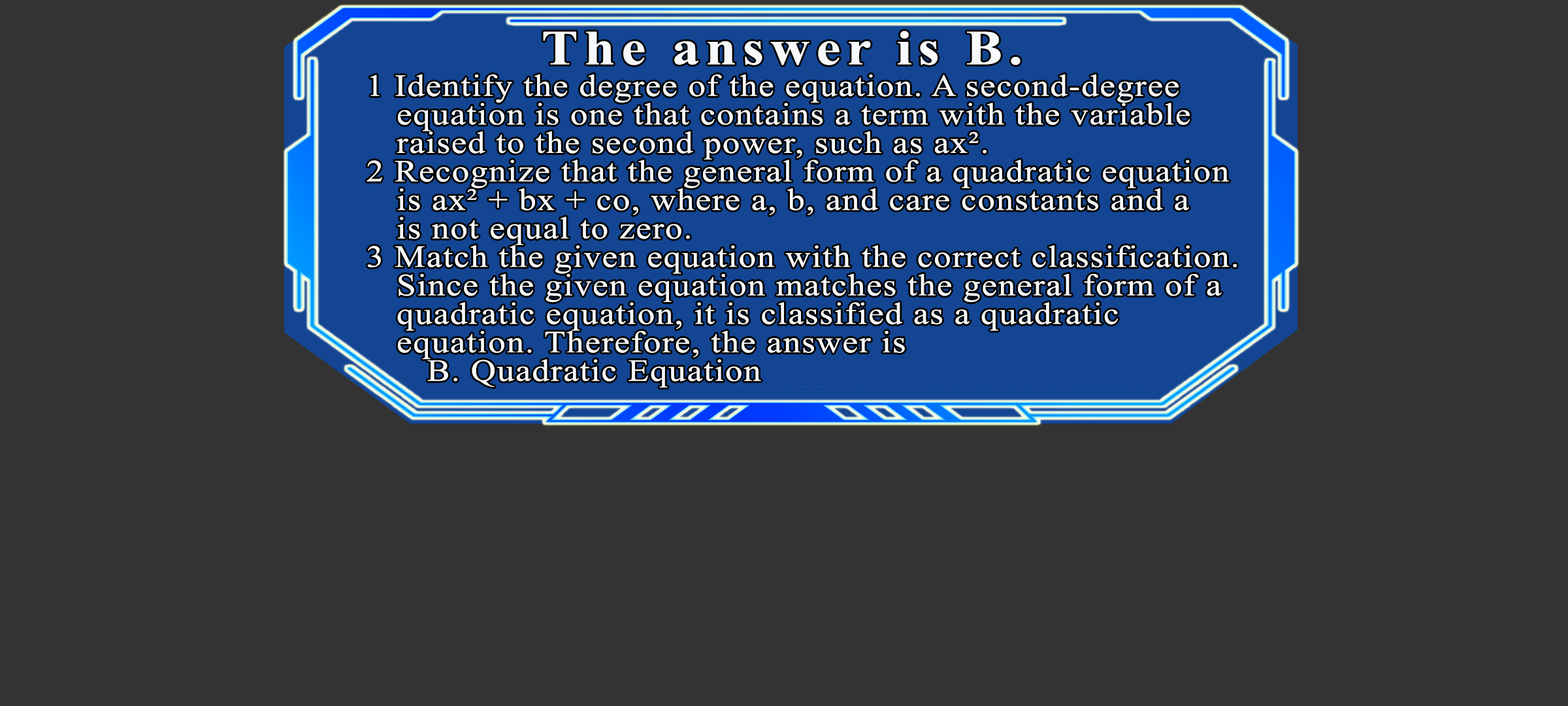
<style>
.page{position:relative;width:1568px;height:706px;background:#333333}
.page>*{position:absolute;margin:0}
.t1{font:49px "TimesNewRomanPS-BoldMT";letter-spacing:0.115em;color:#f7f9fb;scale:1.12 1}
.t2{font:30.9px/28.5px "TimesNewRomanPSMT";letter-spacing:0.035em;color:#f7f9fb;scale:1.12 1}
</style>
<div class="page">
<p class="t1" style="left:543px;top:31px;width:478px;height:34px">The answer is B.</p>
<p class="t2" style="left:367px;top:74px;width:870px;height:313px">1 Identify the degree of the equation. A second-degree<br>  equation is one that contains a term with the variable<br>  raised to the second power, such as ax². <br>2 Recognize that the general form of a quadratic equation<br>  is ax² + bx + co, where a, b, and care constants and a <br>  is not equal to zero. <br>3 Match the given equation with the correct classification.<br>  Since the given equation matches the general form of a<br>  quadratic equation, it is classified as a quadratic<br>  equation. Therefore, the answer is<br>    B. Quadratic Equation</p>
</div>
